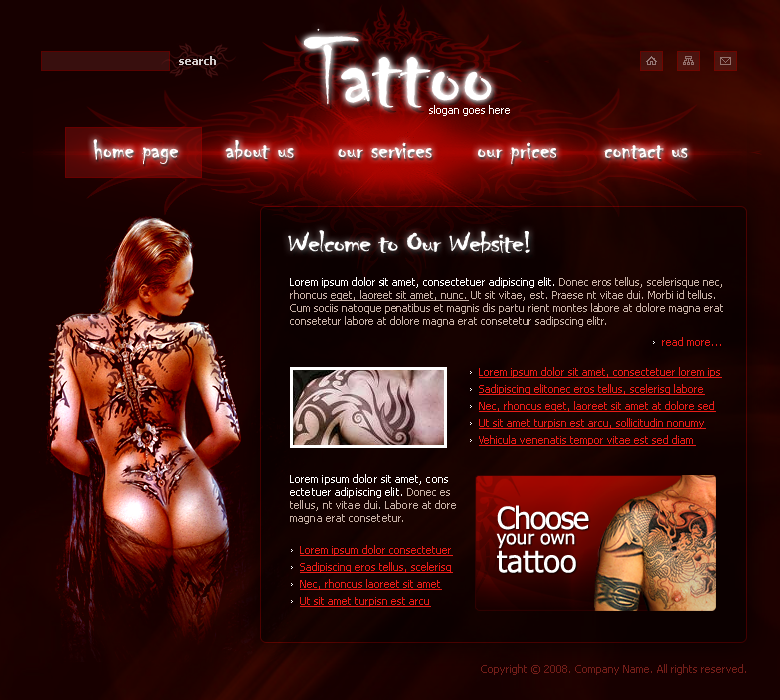
<style>
.page{position:relative;width:780px;height:700px}
.page>*{position:absolute;margin:0}
.t1{font:103.5px "Chiller-Regular";color:#ffffff}
.t2{font:11px "Tahoma-Bold";color:#d1cccc}
.t3{font:11px "Tahoma";color:#ffffff}
.t4{font:28px "Chiller-Regular";color:#ffffff}
.t5{font:32px "Chiller-Regular";letter-spacing:-0.04em;color:#ffffff;scale:1.14 1}
.t6{font:11px/13px "Tahoma";color:#c6b0a5}
.t7{font:11px/13px "Tahoma";color:#ffffff}
.t8{font:11px/13px "Tahoma";color:#c6b0a5;text-decoration:underline}
.t9{font:11px "Tahoma";color:#ea1d18}
.t10{font:11px "Tahoma";color:#ea1d18;text-decoration:underline}
.t11{font:19.1px/15.3px "Tahoma";color:#ffffff}
.t12{font:30.6px/20.4px "Tahoma";letter-spacing:-0.04em;color:#ffffff}
.t13{font:30.6px/28px "Tahoma";color:#ffffff}
.t14{font:11px "Tahoma";color:#741e19}
</style>
<div class="page">
<p class="t1" style="left:303px;top:28px;width:189px;height:80px">Tattoo</p>
<p class="t2" style="left:179px;top:56px;width:37px;height:9px">search</p>
<p class="t3" style="left:429px;top:105px;width:81px;height:11px">slogan goes here</p>
<p class="t4" style="left:93px;top:139px;width:85px;height:26px">home page</p>
<p class="t4" style="left:225px;top:140px;width:69px;height:19px">about us</p>
<p class="t4" style="left:338px;top:142px;width:94px;height:17px">our services</p>
<p class="t4" style="left:478px;top:142px;width:79px;height:23px">our prices</p>
<p class="t4" style="left:604px;top:145px;width:84px;height:14px">contact us</p>
<p class="t5" style="left:288px;top:230px;width:242px;height:23px">Welcome to Our Website!</p>
<p class="t6" style="left:290px;top:277px;width:433px;height:50px"><span class="t7">Lorem ipsum dolor sit amet, consectetuer adipiscing elit.</span> Donec eros tellus, scelerisque nec, rhoncus <span class="t8">eget, laoreet sit amet, nunc.</span> Ut sit vitae, est. Praese nt vitae dui. Morbi id tellus. Cum sociis natoque penatibus et magnis dis partu rient montes labore at dolore magna erat consetetur labore at dolore magna erat consetetur sadipscing elitr.</p>
<p class="t9" style="left:662px;top:337px;width:59px;height:9px">read more...</p>
<p class="t10" style="left:479px;top:367px;width:243px;height:11px">Lorem ipsum dolor sit amet, consectetuer lorem ips</p>
<p class="t10" style="left:479px;top:384px;width:226px;height:11px">Sadipiscing elitonec eros tellus, scelerisq labore</p>
<p class="t10" style="left:479px;top:401px;width:237px;height:11px">Nec, rhoncus eget, laoreet sit amet at dolore sed</p>
<p class="t10" style="left:479px;top:418px;width:227px;height:11px">Ut sit amet turpisn est arcu, sollicitudin nonumy</p>
<p class="t10" style="left:479px;top:435px;width:217px;height:11px">Vehicula venenatis tempor vitae est sed diam</p>
<p class="t6" style="left:290px;top:474px;width:166px;height:50px"><span class="t7">Lorem ipsum dolor sit amet, cons ectetuer adipiscing elit. </span>Donec es tellus, nt vitae dui. Labore at dore magna erat consetetur.</p>
<p class="t11" style="left:496px;top:505px;width:93px;height:68px"><span class="t12">Choose<br></span>your own <br><span class="t13">tattoo</span></p>
<p class="t10" style="left:300px;top:545px;width:153px;height:11px">Lorem ipsum dolor consectetuer</p>
<p class="t10" style="left:300px;top:562px;width:153px;height:11px">Sadipiscing eros tellus, scelerisq</p>
<p class="t10" style="left:300px;top:579px;width:142px;height:11px">Nec, rhoncus laoreet sit amet</p>
<p class="t10" style="left:300px;top:597px;width:131px;height:10px">Ut sit amet turpisn est arcu</p>
<p class="t14" style="left:481px;top:664px;width:265px;height:11px">Copyright © 2008. Company Name. All rights reserved.</p>
</div>
